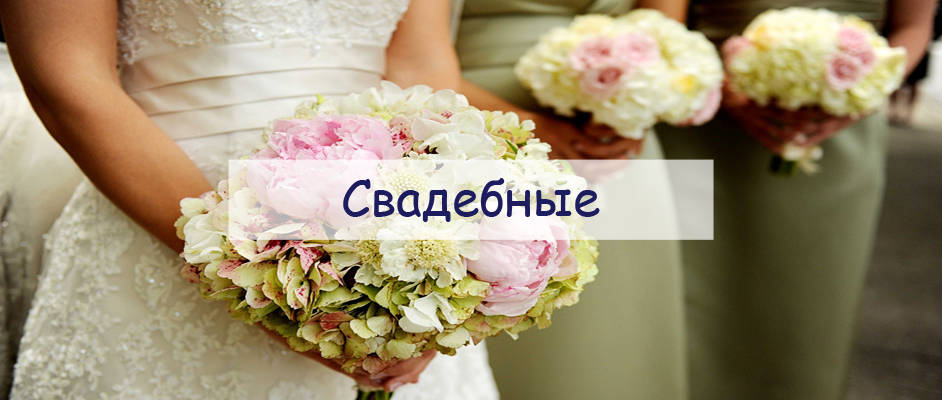
<style>
.page{position:relative;width:942px;height:400px}
.page>*{position:absolute;margin:0}
.t1{font:50px "ComicSansMS";color:#1d1c5e}
</style>
<div class="page">
<p class="t1" style="left:343px;top:178px;width:257px;height:44px">Свадебные</p>
</div>
